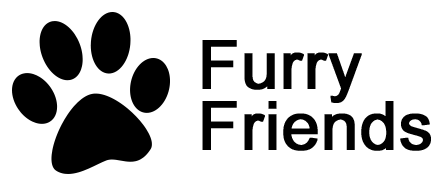
<style>
.page{position:relative;width:443px;height:185px;background:#ffffff}
.page>*{position:absolute;margin:0}
.t1{font:67px/61px "ArialMT";color:#000000;font-weight:bold}
</style>
<div class="page">
<p class="t1" style="left:202px;top:40px;width:229px;height:111px">Furry <br>Friends</p>
</div>
